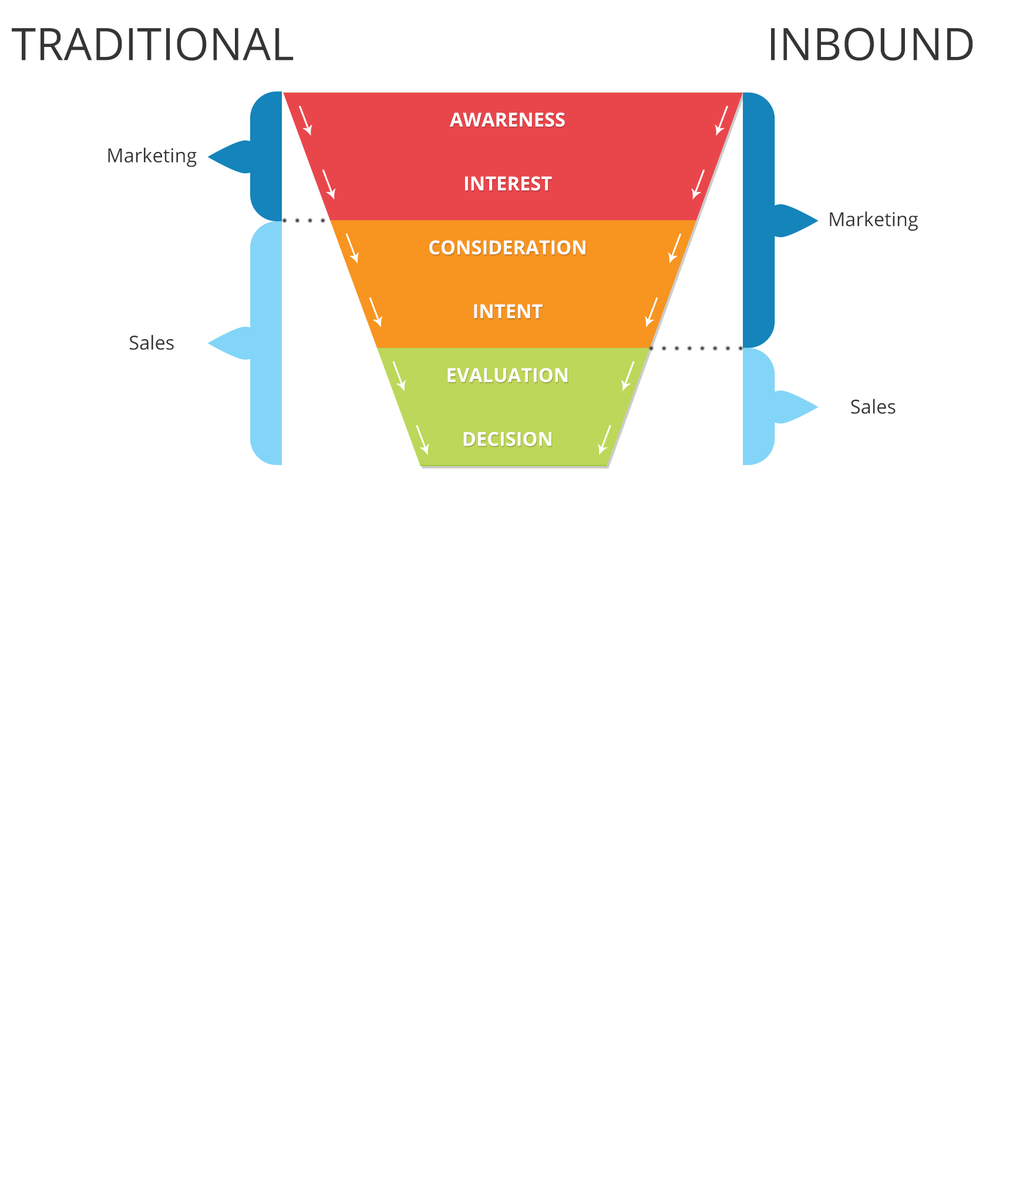
<style>
.page{position:relative;width:1013px;height:1177px;background:#ffffff}
.page>*{position:absolute;margin:0}
.t1{font:44.7px "OpenSans";color:#353535;text-transform:uppercase}
.t2{font:19.2px/63.9px "OpenSans-Bold";color:#ffffff;text-transform:uppercase}
.t3{font:19.2px "OpenSans";color:#353535}
</style>
<div class="page">
<p class="t1" style="left:12px;top:28px;width:282px;height:33px">Traditional</p>
<p class="t1" style="left:771px;top:28px;width:202px;height:33px">Inbound</p>
<p class="t2" style="left:429px;top:112px;width:156px;height:334px;text-align:center">Awareness<br>Interest<br>Consideration<br>Intent<br>Evaluation<br>Decision</p>
<p class="t3" style="left:108px;top:147px;width:89px;height:20px">Marketing</p>
<p class="t3" style="left:830px;top:211px;width:88px;height:20px">Marketing</p>
<p class="t3" style="left:130px;top:335px;width:44px;height:15px">Sales</p>
<p class="t3" style="left:851px;top:399px;width:44px;height:15px">Sales</p>
</div>
